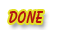
<style>
.page{position:relative;width:75px;height:30px;background:#ffffff}
.page>*{position:absolute;margin:0}
.t1{font:18px "BalloonBT-Bold";color:#b11313}
</style>
<div class="page">
<p class="t1" style="left:9px;top:11px;width:35px;height:12px">Done</p>
</div>
